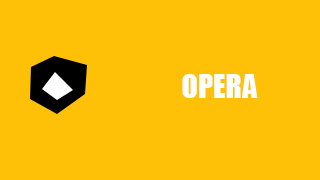
<style>
.page{position:relative;width:320px;height:180px;background:#ffc107}
.page>*{position:absolute;margin:0}
.t1{font:30px "Impact";color:#ffffff}
</style>
<div class="page">
<p class="t1" style="left:182px;top:74px;width:76px;height:24px">OPERA</p>
</div>
